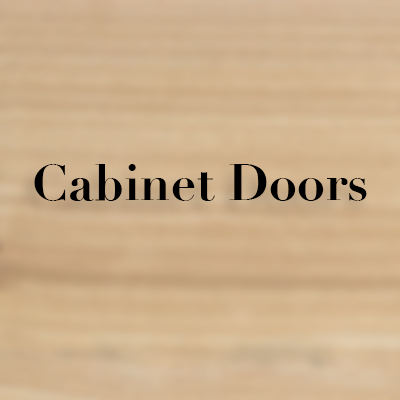
<style>
.page{position:relative;width:400px;height:400px}
.page>*{position:absolute;margin:0}
.t1{font:50px "Didot-Bold";color:#000000}
</style>
<div class="page">
<p class="t1" style="left:34px;top:164px;width:333px;height:37px">Cabinet Doors</p>
</div>
